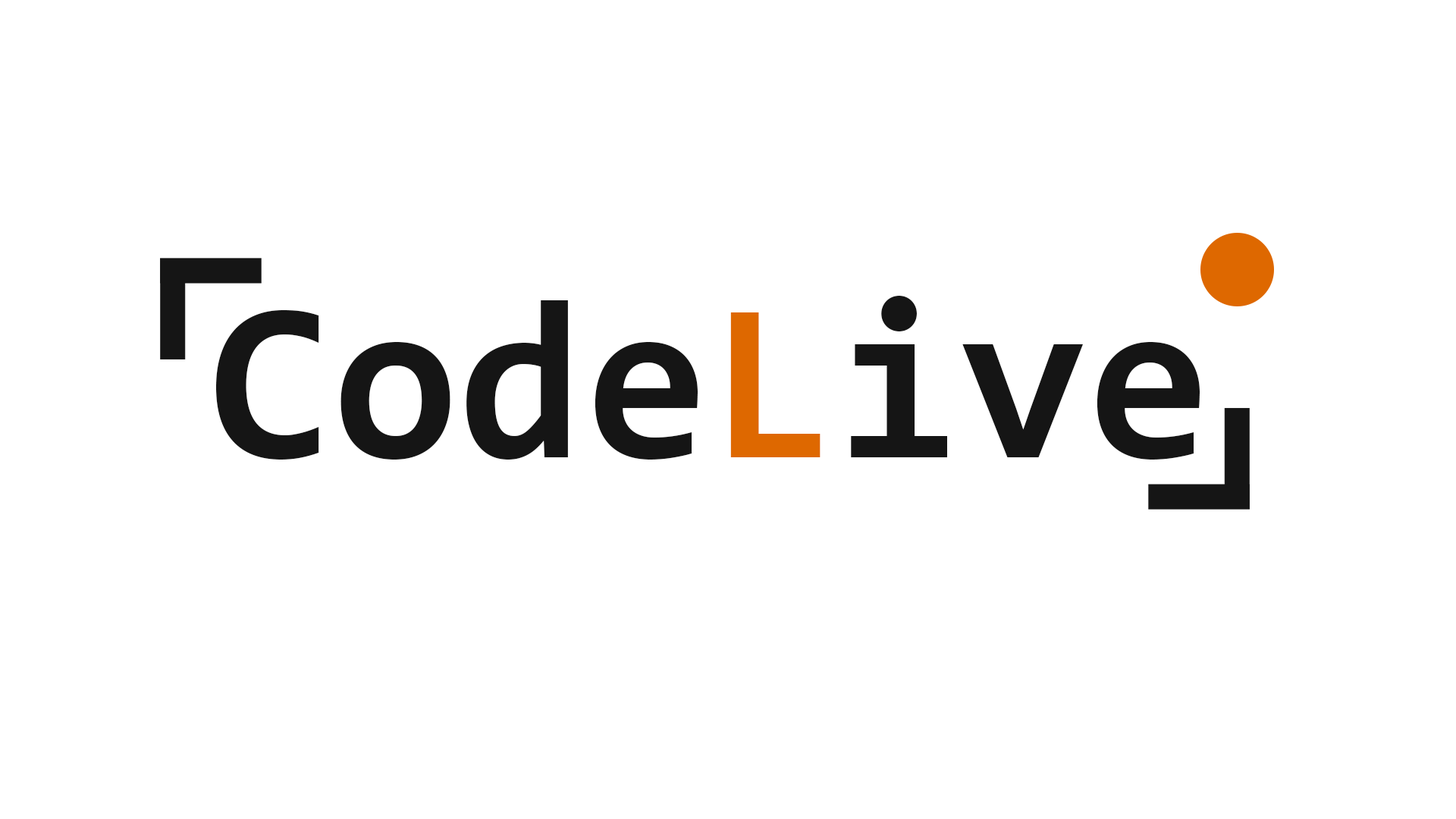
<style>
.page{position:relative;width:1456px;height:819px;background:#ffffff}
.page>*{position:absolute;margin:0}
.t1{font:227.5px "Consolas-Bold";letter-spacing:0.002em;color:#151515}
.t2{font:227.5px "Consolas-Bold";letter-spacing:0.002em;color:#de6800}
</style>
<div class="page">
<p class="t1" style="left:216px;top:296px;width:984px;height:164px">Code<span class="t2">L</span>ive</p>
</div>
